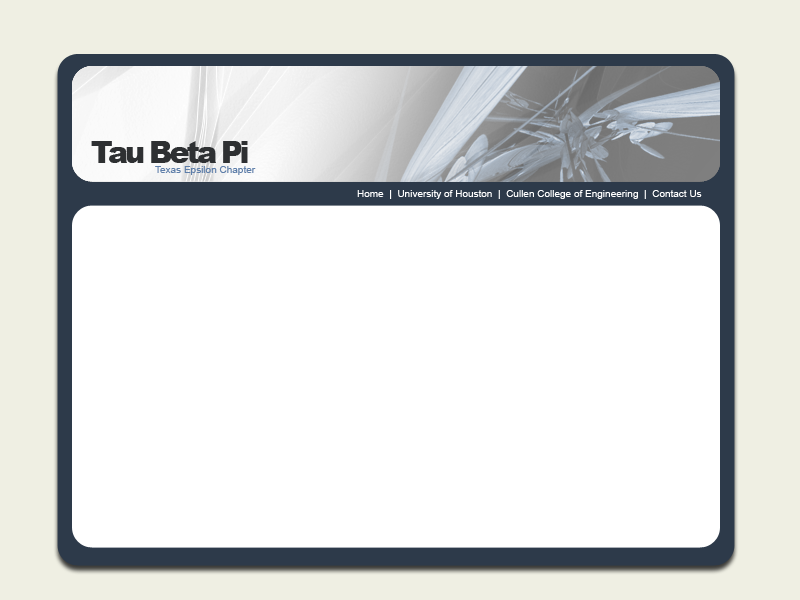
<style>
.page{position:relative;width:800px;height:600px;background:#ffffff}
.page>*{position:absolute;margin:0}
.t1{font:30px "Arial-Black";letter-spacing:-0.1em;color:#2e3032}
.t2{font:10px "ArialMT";color:#5e7ea9}
.t3{font:10px "ArialMT";color:#ffffff}
</style>
<div class="page">
<p class="t1" style="left:91px;top:141px;width:157px;height:22px">Tau Beta Pi</p>
<p class="t2" style="left:155px;top:166px;width:101px;height:9px">Texas Epsilon Chapter</p>
<p class="t3" style="left:357px;top:190px;width:345px;height:9px">Home  |  University of Houston  |  Cullen College of Engineering  |  Contact Us</p>
</div>
